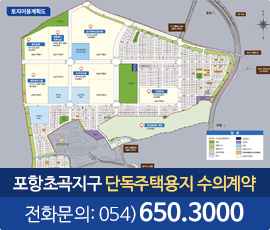
<style>
.page{position:relative;width:270px;height:230px;background:#b3b8c2}
.page>*{position:absolute;margin:0}
.t1{font:17px "NanumBarunGothicOTF";letter-spacing:-0.025em;color:#ffde6b}
.t2{font:17px "NanumBarunGothicOTF";letter-spacing:-0.025em;color:#ffffff}
.t3{font:18px "NanumBarunGothicOTFLight";color:#ffffff}
.t4{font:24px "NanumBarunGothicOTFBold";color:#ffffff}
</style>
<div class="page">
<p class="t1" style="left:13px;top:175px;width:243px;height:17px"><span class="t2">포항초곡지구 </span>단독주택용지 수의계약</p>
<p class="t3" style="left:25px;top:202px;width:219px;height:21px">전화문의: 054)<span class="t4">650.3000</span></p>
</div>
